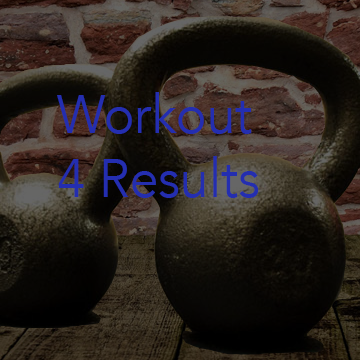
<style>
.page{position:relative;width:360px;height:360px}
.page>*{position:absolute;margin:0}
.t1{font:54px "Avenir-Book";color:#242eb0;scale:0.95 1}
</style>
<div class="page">
<p class="t1" style="left:57px;top:92px;width:202px;height:106px">Workout<br>4 Results</p>
</div>
